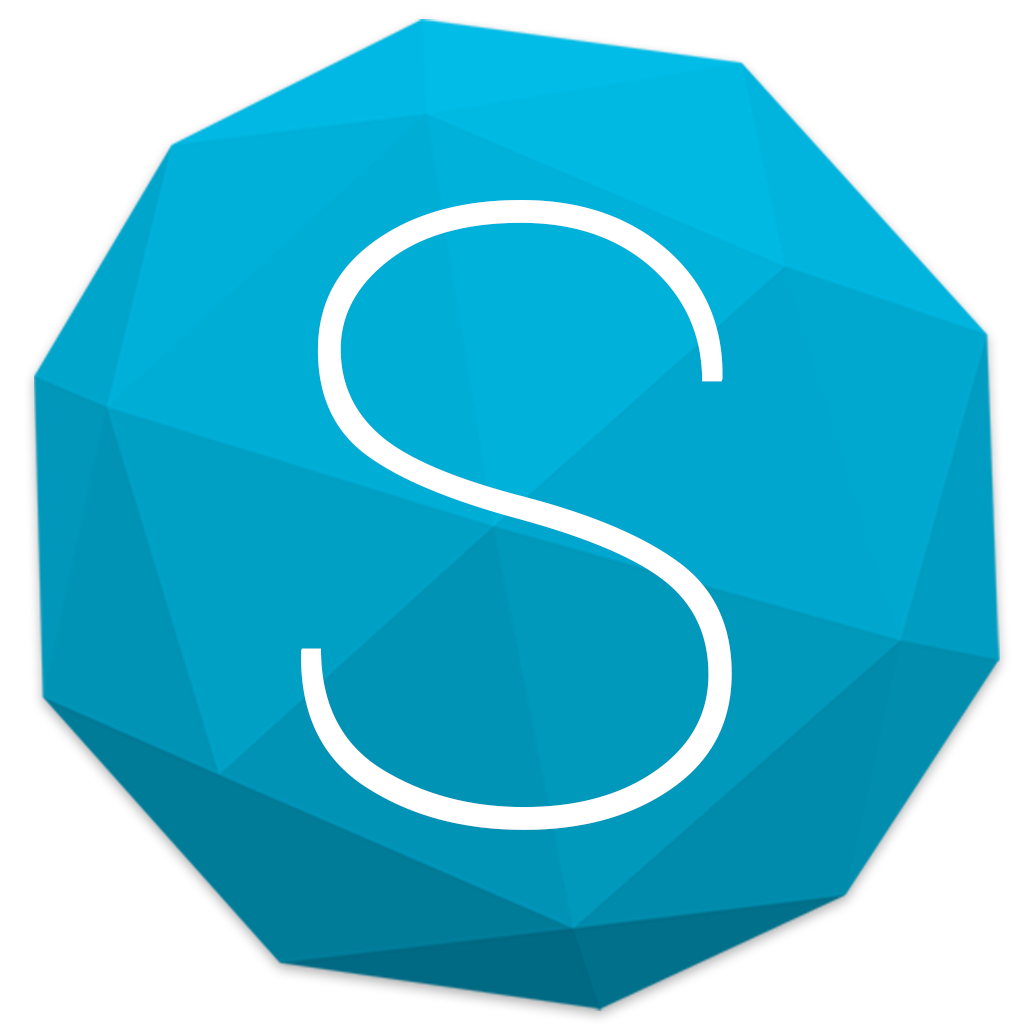
<style>
.page{position:relative;width:1024px;height:1024px;background:#ffffff}
.page>*{position:absolute;margin:0}
.t1{font:861.2px "Roboto-Thin";color:#ffffff}
</style>
<div class="page">
<p class="t1" style="left:301px;top:200px;width:431px;height:630px">S</p>
</div>
